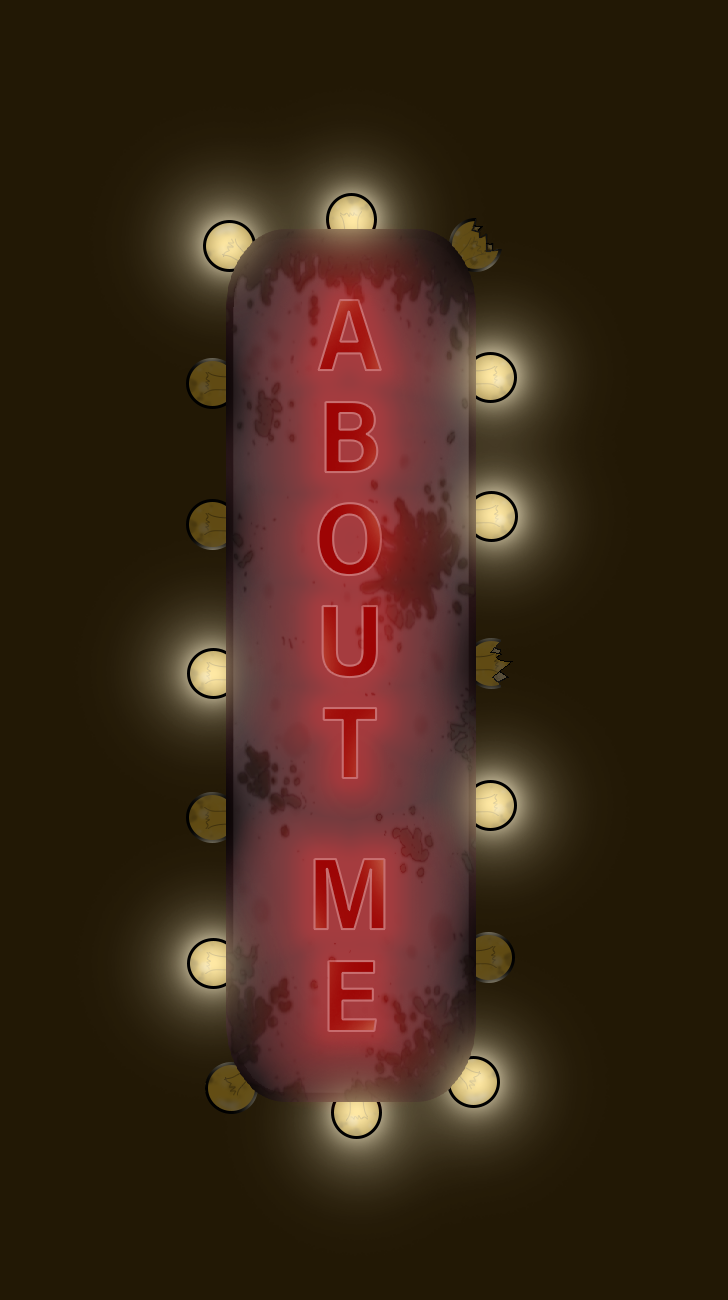
<style>
.page{position:relative;width:728px;height:1300px;background:#221805}
.page>*{position:absolute;margin:0}
.t1{font:102px "AcuminConcept-SemiCondensedBold";color:#a31310}
</style>
<div class="page">
<p class="t1" style="left:314px;top:300px;width:71px;height:731px;text-align:center">ABOUT  ME</p>
</div>
